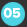
<style>
.page{position:relative;width:27px;height:27px;background:#4dd4e4}
.page>*{position:absolute;margin:0}
.t1{font:14px "ProximaNova-Bold";color:#ffffff;text-transform:uppercase}
</style>
<div class="page">
<p class="t1" style="left:3px;top:7px;width:18px;height:11px">05</p>
</div>
